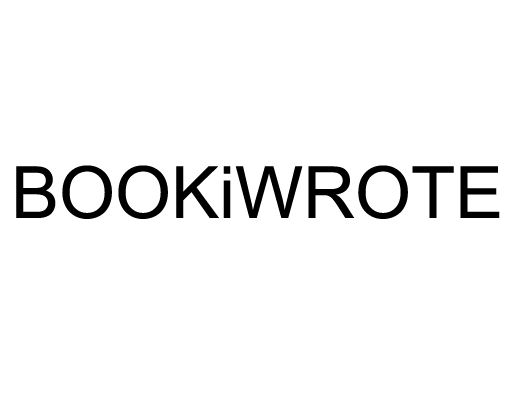
<style>
.page{position:relative;width:512px;height:405px;background:#ffffff}
.page>*{position:absolute;margin:0}
.t1{font:72px "ArialMT";color:#000000}
</style>
<div class="page">
<p class="t1" style="left:16px;top:165px;width:484px;height:54px">BOOKiWROTE</p>
</div>
